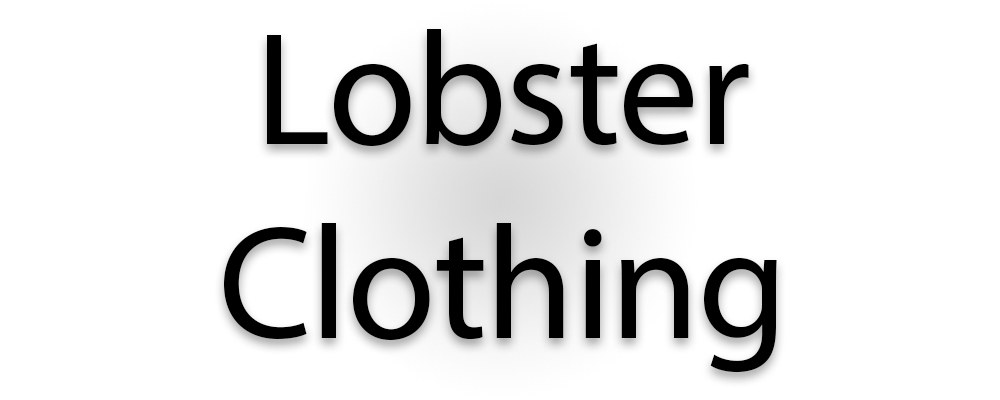
<style>
.page{position:relative;width:1000px;height:400px;background:#ffffff}
.page>*{position:absolute;margin:0}
.t1{font:161.6px "MyriadPro-Regular";letter-spacing:-0.01em;color:#000000}
</style>
<div class="page">
<p class="t1" style="left:224px;top:29px;width:553px;height:344px;text-align:center">Lobster<br>Clothing</p>
</div>
